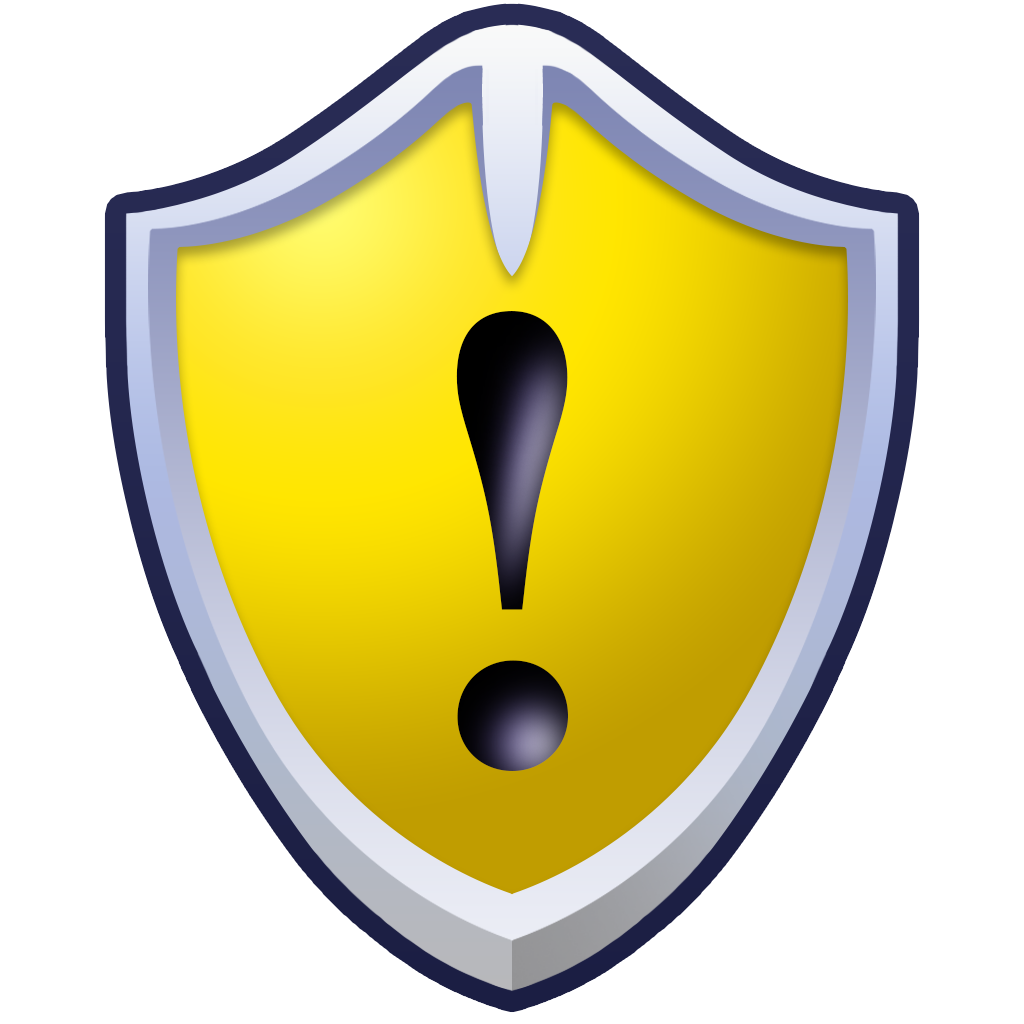
<style>
.page{position:relative;width:1024px;height:1024px;background:#ffffff}
.page>*{position:absolute;margin:0}
.t1{font:654.2px "STIXGeneral-Bold";letter-spacing:-0.025em}
</style>
<div class="page">
<p class="t1" style="left:456px;top:311px;width:112px;height:460px">!</p>
</div>
